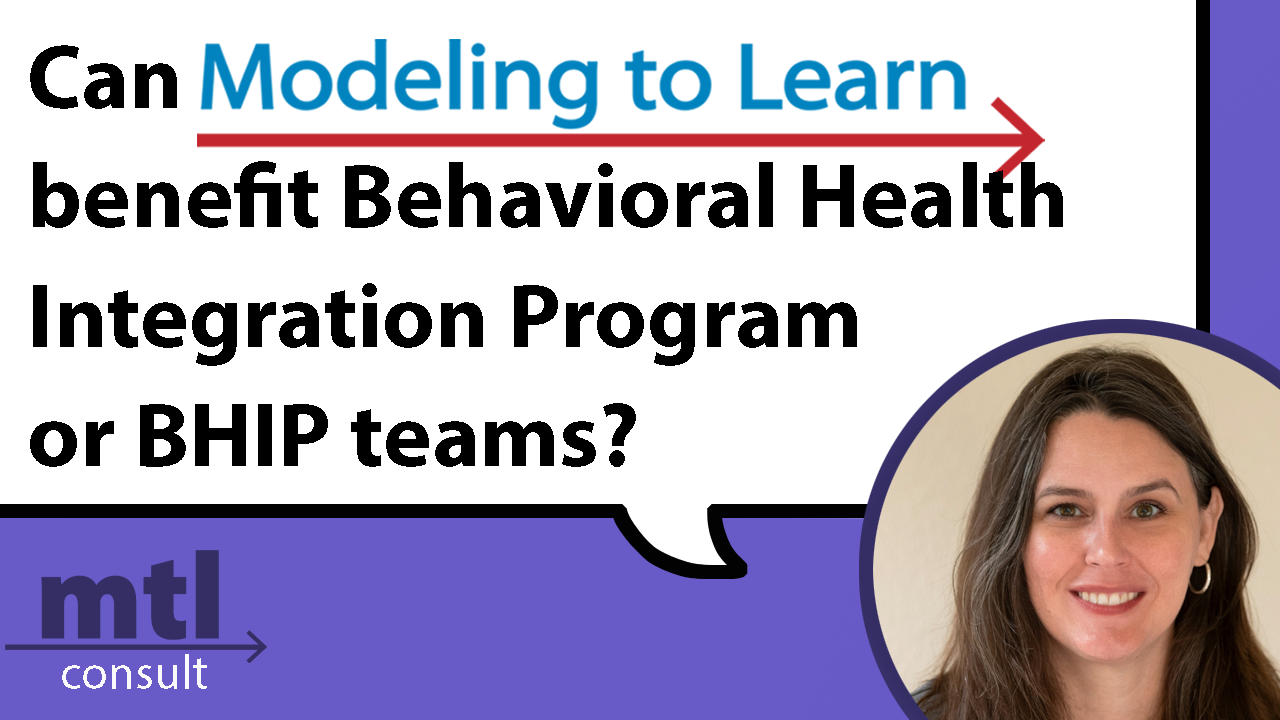
<style>
.page{position:relative;width:1280px;height:720px;background:#ffffff}
.page>*{position:absolute;margin:0}
.t1{font:91.7px/108.3px "MyriadPro-Bold";color:#000000}
</style>
<div class="page">
<p class="t1" style="left:30px;top:45px;width:1033px;height:422px">Can<br>benefit Behavioral Health <br>Integration Program <br>or BHIP teams?</p>
</div>
